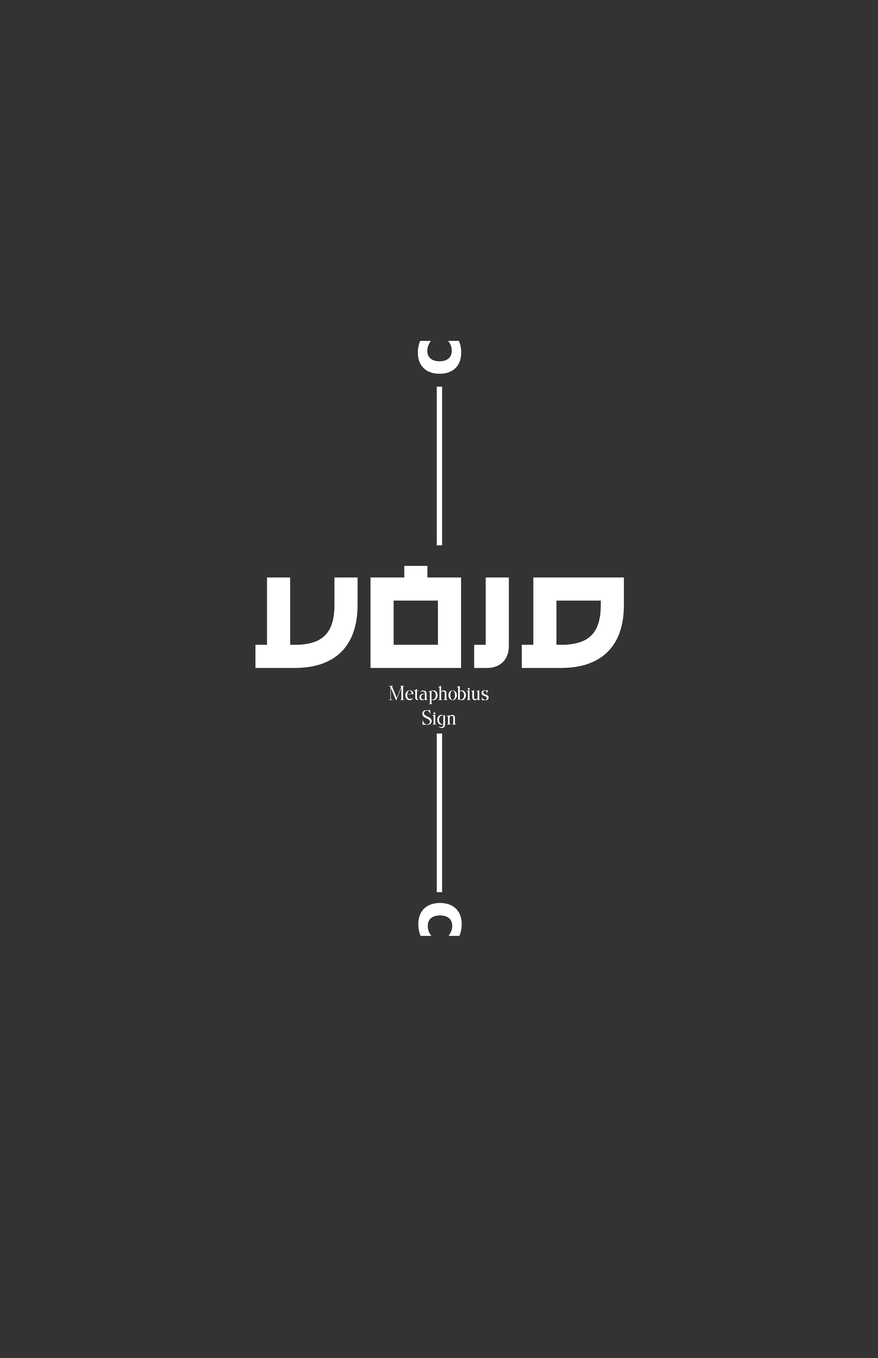
<style>
.page{position:relative;width:878px;height:1358px;background:#333333}
.page>*{position:absolute;margin:0}
.t1{font:75.6px "DejaVuSansCondensed-Bold";color:#ffffff}
.t2{font:128.5px "TakisumoDemo-Regular";color:#ffffff}
.t3{font:20.2px "Quartist-Regular";color:#ffffff}
</style>
<div class="page">
<p class="t1" style="left:418px;top:341px;width:44px;height:33px;rotate:-90deg">c</p>
<p class="t2" style="left:256px;top:566px;width:368px;height:102px">VOID</p>
<p class="t3" style="left:388px;top:685px;width:101px;height:43px;text-align:center">Metaphobius<br>Sign</p>
<p class="t1" style="left:418px;top:903px;width:44px;height:33px;rotate:90deg">c</p>
</div>
